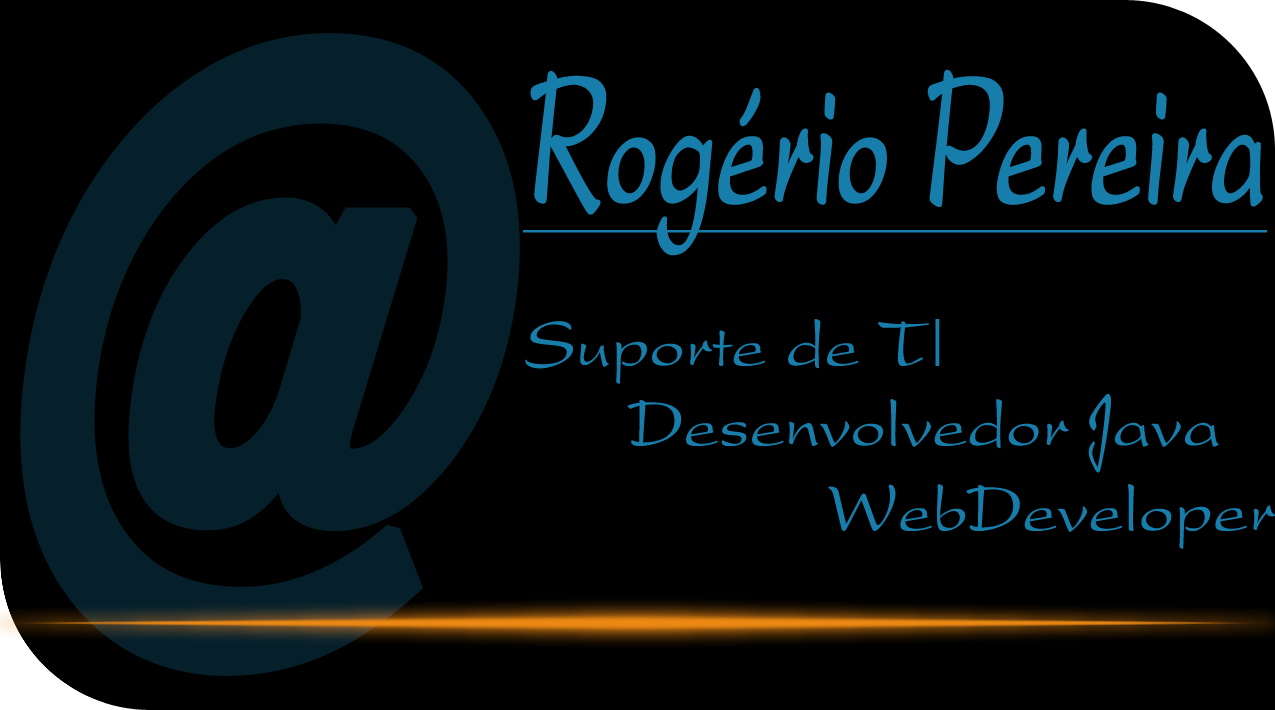
<style>
.page{position:relative;width:1275px;height:710px;background:#000000}
.page>*{position:absolute;margin:0}
.t1{font:700px "BremenBT-Black";color:#06202b;font-weight:bold;font-style:italic;scale:0.71 1}
.t2{font:200px "PresidentPlain";color:#177eac;font-weight:bold;font-style:italic;text-decoration:underline;scale:0.5 1}
.t3{font:70px "PresidentPlain";color:#177eac}
.t4{font:90px "Salsa-";color:#177eac;scale:0.6 1}
</style>
<div class="page">
<p class="t1" style="left:20px;top:33px;width:500px;height:643px">@</p>
<p class="t2" style="left:523px;top:69px;width:744px;height:187px">Rogério Pereira</p>
<p class="t3" style="left:525px;top:319px;width:415px;height:65px">Suporte de T|</p>
<p class="t3" style="left:627px;top:393px;width:592px;height:80px">Desenvolvedor <span class="t4">J</span>ava</p>
<p class="t3" style="left:828px;top:484px;width:448px;height:65px">WebDeveloper</p>
</div>
